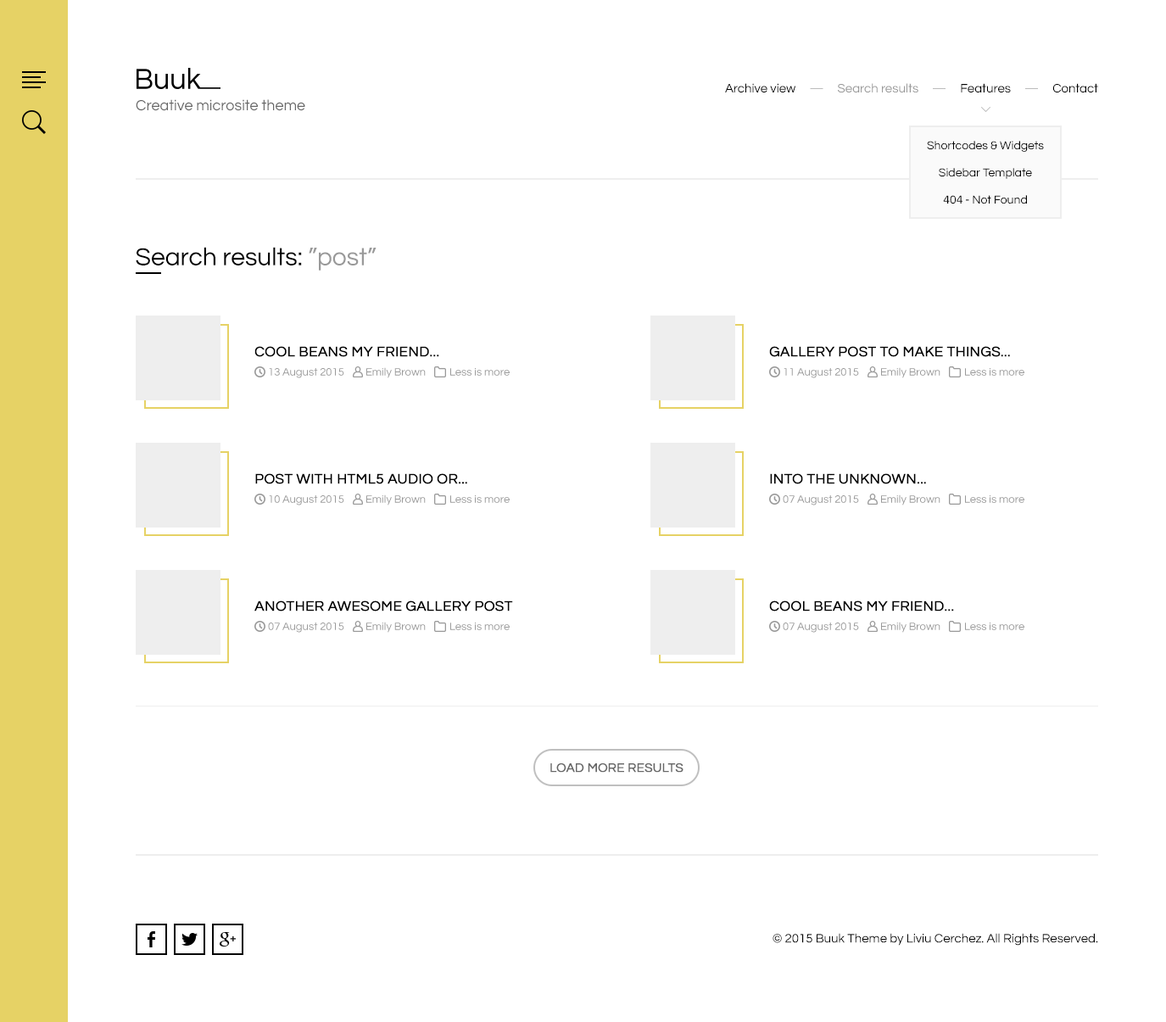
<style>
.page{position:relative;width:1166px;height:1022px;background:#ffffff}
.page>*{position:absolute;margin:0}
.t1{font:12.7px "Questrial-Regular";color:#999999}
.t2{font:12.7px "Questrial-Regular";color:#000000}
.t3{font:12.7px "Questrial-Regular";color:#bbbbbb}
.t4{font:15.3px "Questrial-Regular";color:#676767}
.t5{font:11.9px/27.1px "Questrial-Regular";color:#000000}
.t6{font:25.5px "Questrial-Regular";color:#000000}
.t7{font:25.5px "Questrial-Regular";color:#999999}
.t8{font:14.4px "Questrial-Regular";color:#000000;text-transform:uppercase;font-weight:bold}
.t9{font:11px "Questrial-Regular";color:#999999}
.t10{font:12.7px "Questrial-Regular";color:#676767;text-transform:uppercase;font-weight:bold}
</style>
<div class="page">
<p class="t1" style="left:725px;top:83px;width:374px;height:9px"><span class="t2">Archive view     </span><span class="t3">—     </span>Search results     <span class="t3">—</span><span class="t2">     Features     </span><span class="t3">—</span><span class="t2">     Contact</span></p>
<p class="t4" style="left:136px;top:99px;width:169px;height:12px">Creative microsite theme</p>
<p class="t5" style="left:927px;top:141px;width:117px;height:63px;text-align:center">Shortcodes &amp; Widgets<br>Sidebar Template<br>404 - Not Found</p>
<p class="t6" style="left:136px;top:247px;width:241px;height:24px">Search results: <span class="t7">”post”</span></p>
<p class="t8" style="left:255px;top:346px;width:184px;height:11px">Cool beans my friend...</p>
<p class="t8" style="left:769px;top:346px;width:241px;height:11px">Gallery post to make things...</p>
<p class="t9" style="left:269px;top:368px;width:75px;height:10px">13 August 2015</p>
<p class="t9" style="left:366px;top:367px;width:60px;height:11px">Emily Brown</p>
<p class="t9" style="left:450px;top:368px;width:60px;height:8px">Less is more</p>
<p class="t9" style="left:784px;top:368px;width:75px;height:10px">11 August 2015</p>
<p class="t9" style="left:881px;top:367px;width:60px;height:11px">Emily Brown</p>
<p class="t9" style="left:965px;top:368px;width:60px;height:8px">Less is more</p>
<p class="t8" style="left:255px;top:473px;width:212px;height:11px">Post with HTML5 audio or...</p>
<p class="t8" style="left:770px;top:473px;width:156px;height:11px">Into the unknown...</p>
<p class="t9" style="left:269px;top:495px;width:75px;height:11px">10 August 2015</p>
<p class="t9" style="left:366px;top:495px;width:60px;height:11px">Emily Brown</p>
<p class="t9" style="left:450px;top:495px;width:60px;height:8px">Less is more</p>
<p class="t9" style="left:783px;top:495px;width:76px;height:11px">07 August 2015</p>
<p class="t9" style="left:881px;top:495px;width:60px;height:11px">Emily Brown</p>
<p class="t9" style="left:965px;top:495px;width:60px;height:8px">Less is more</p>
<p class="t8" style="left:255px;top:601px;width:258px;height:11px">Another awesome gallery post</p>
<p class="t8" style="left:769px;top:601px;width:185px;height:11px">Cool beans my friend...</p>
<p class="t9" style="left:268px;top:623px;width:76px;height:10px">07 August 2015</p>
<p class="t9" style="left:366px;top:622px;width:60px;height:11px">Emily Brown</p>
<p class="t9" style="left:450px;top:623px;width:60px;height:7px">Less is more</p>
<p class="t9" style="left:783px;top:623px;width:76px;height:10px">07 August 2015</p>
<p class="t9" style="left:881px;top:622px;width:60px;height:11px">Emily Brown</p>
<p class="t9" style="left:965px;top:623px;width:60px;height:7px">Less is more</p>
<p class="t10" style="left:551px;top:764px;width:133px;height:9px">Load more results</p>
<p class="t2" style="left:773px;top:933px;width:326px;height:13px">© 2015 Buuk Theme by Liviu Cerchez. All Rights Reserved.</p>
</div>
